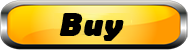
<style>
.page{position:relative;width:188px;height:50px}
.page>*{position:absolute;margin:0}
.t1{font:31.4px "BerlinSansFBDemi-Bold";letter-spacing:0.1em;color:#000000;font-style:italic}
</style>
<div class="page">
<p class="t1" style="left:60px;top:14px;width:63px;height:26px">Buy</p>
</div>
